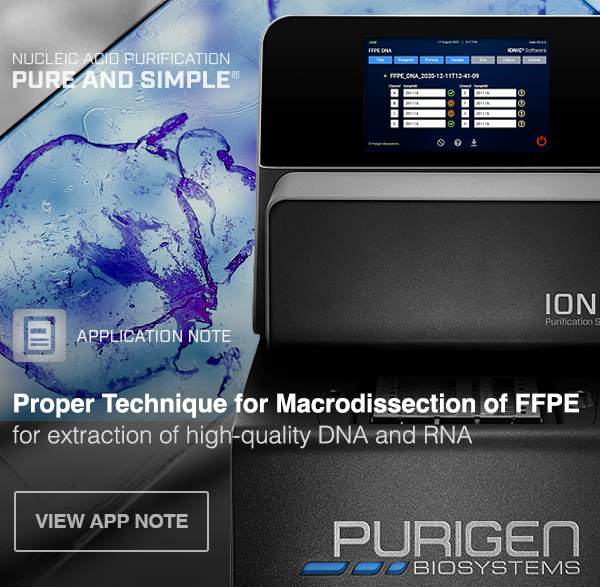
<style>
.page{position:relative;width:600px;height:587px}
.page>*{position:absolute;margin:0}
.t1{font:16.9px "Forza-Book";color:#ebeef1;text-transform:uppercase}
.t2{font:25.5px/31px "Helvetica-Bold";color:#ffffff}
.t3{font:24px/31px "Helvetica-Light";color:#d9d9d9}
.t4{font:19.8px "Helvetica-Bold";letter-spacing:-0.01em;color:#b2b2b2;text-transform:uppercase}
</style>
<div class="page">
<p class="t1" style="left:77px;top:330px;width:154px;height:12px">Application Note</p>
<p class="t2" style="left:12px;top:393px;width:567px;height:56px">Proper Technique for Macrodissection of FFPE<br><span class="t3">for extraction of high-quality DNA and RNA</span></p>
<p class="t4" style="left:35px;top:514px;width:153px;height:14px">VIEW APP NOTE</p>
</div>
